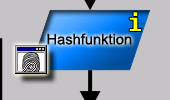
<style>
.page{position:relative;width:170px;height:100px;background:#c6c3c6}
.page>*{position:absolute;margin:0}
.t1{font:24px "Fixedsys";color:#ffff00}
.t2{font:14.7px "ArialMT";color:#000000}
</style>
<div class="page">
<p class="t1" style="left:129px;top:12px;width:12px;height:19px">i</p>
<p class="t2" style="left:47px;top:33px;width:85px;height:12px">Hashfunktion</p>
</div>
